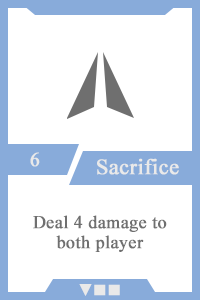
<style>
.page{position:relative;width:200px;height:300px;background:#ffffff}
.page>*{position:absolute;margin:0}
.t1{font:20px "TimesNewRomanPSMT";color:#e9e9e9;font-weight:bold}
.t2{font:22px "TimesNewRomanPSMT";color:#e9e9e9;font-weight:bold}
.t3{font:18px/20px "TimesNewRomanPSMT";color:#6f6f6f;font-weight:bold}
.t4{font:14px "AdobeHeitiStd-Regular";color:#e9e9e9;font-weight:bold}
</style>
<div class="page">
<p class="t1" style="left:30px;top:152px;width:10px;height:15px">6</p>
<p class="t2" style="left:97px;top:158px;width:82px;height:17px">Sacrifice</p>
<p class="t3" style="left:33px;top:215px;width:134px;height:37px;text-align:center">Deal 4 damage to<br>both player</p>
<p class="t4" style="left:79px;top:284px;width:41px;height:12px">▼■■</p>
</div>
